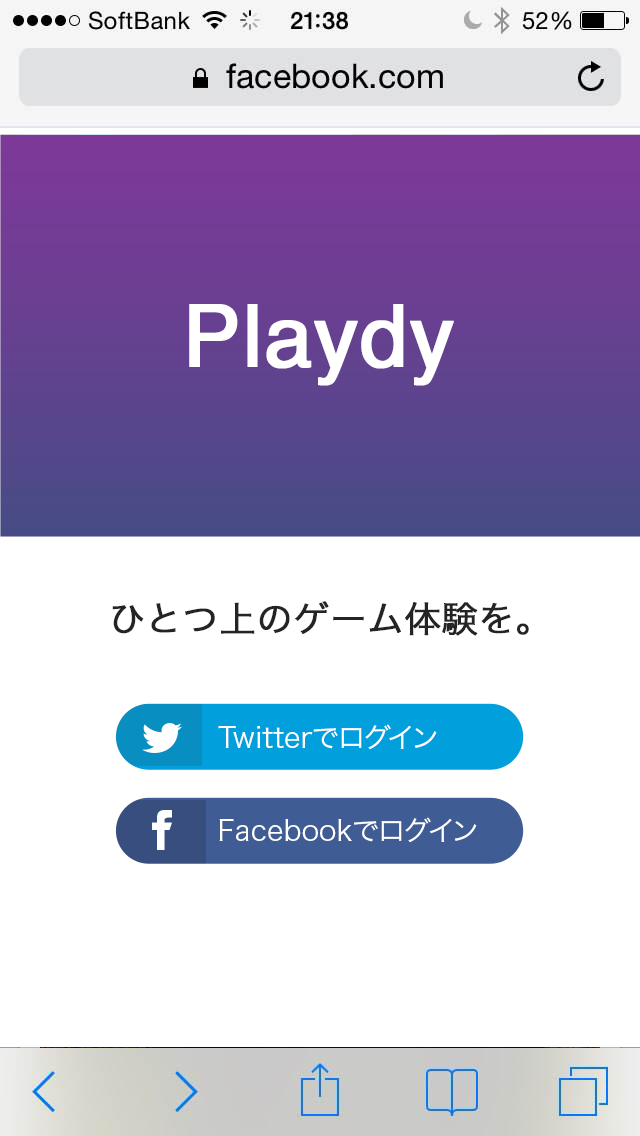
<style>
.page{position:relative;width:640px;height:1136px;background:#ffffff}
.page>*{position:absolute;margin:0}
.t1{font:86px "Helvetica";color:#ffffff;font-weight:bold}
.t2{font:36px "HiraKakuPro-W3";color:#242424;font-weight:bold}
.t3{font:28px "HiraKakuPro-W3";color:#ffffff}
</style>
<div class="page">
<p class="t1" style="left:189px;top:304px;width:265px;height:82px">Playdy</p>
<p class="t2" style="left:112px;top:601px;width:417px;height:35px">ひとつ上のゲーム体験を。</p>
<p class="t3" style="left:218px;top:724px;width:219px;height:26px">Twitterでログイン</p>
<p class="t3" style="left:219px;top:817px;width:258px;height:26px">Facebookでログイン</p>
</div>
